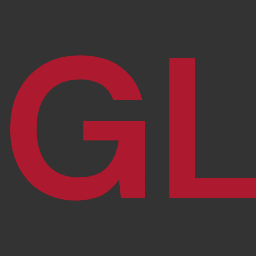
<style>
.page{position:relative;width:256px;height:256px;background:#333333}
.page>*{position:absolute;margin:0}
.t1{font:200px "DMSans-Bold";color:#f3f3f3}
.t2{font:200px "DMSans-Bold";color:#ad192e}
</style>
<div class="page">
<p class="t1" style="left:10px;top:55px;width:248px;height:146px">G<span class="t2">L</span></p>
</div>
